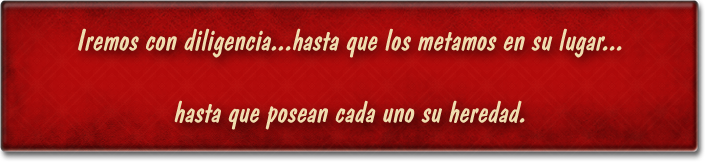
<style>
.page{position:relative;width:705px;height:166px}
.page>*{position:absolute;margin:0}
.t1{font:30px "DomDiagonalBT-Regular";color:#efddaf}
</style>
<div class="page">
<p class="t1" style="left:78px;top:28px;width:544px;height:102px;text-align:center">Iremos con diligencia...hasta que los metamos en su lugar...<br><br>hasta que posean cada uno su heredad.</p>
</div>
